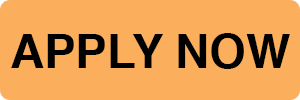
<style>
.page{position:relative;width:300px;height:100px;background:#fbaf5d}
.page>*{position:absolute;margin:0}
.t1{font:47.3px "Helvetica-Bold";color:#000000;text-transform:uppercase}
</style>
<div class="page">
<p class="t1" style="left:11px;top:33px;width:279px;height:36px">APPLY NOW</p>
</div>
